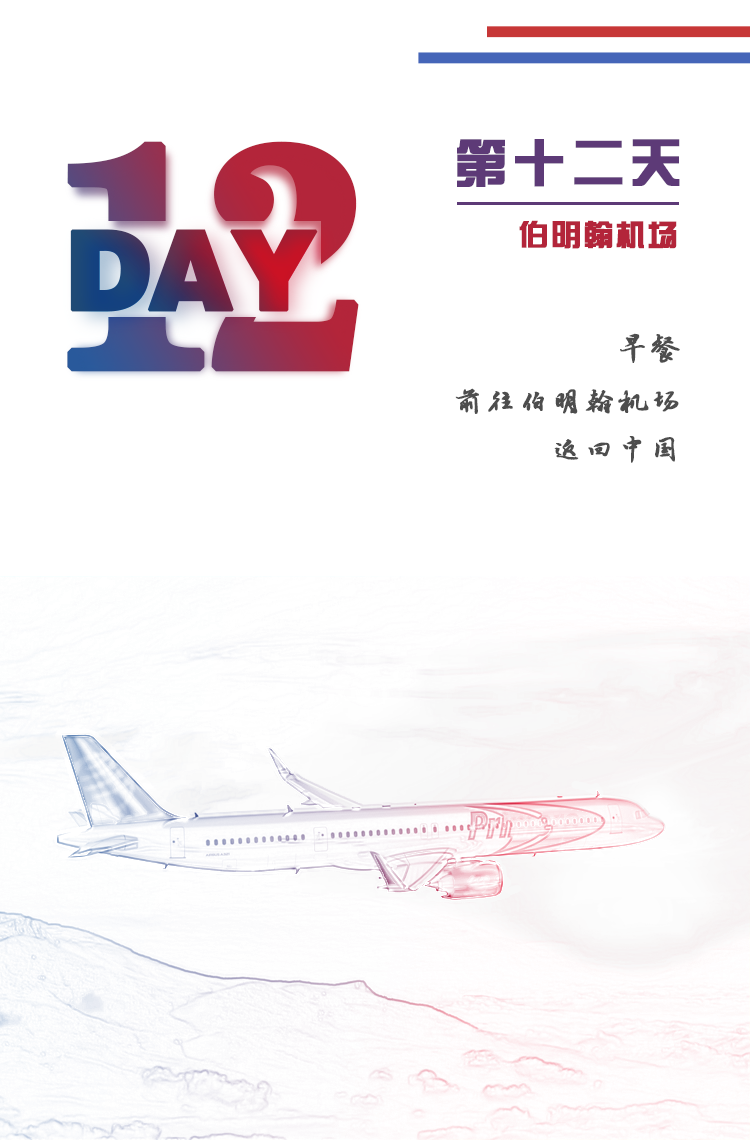
<style>
.page{position:relative;width:750px;height:1140px;background:#ffffff}
.page>*{position:absolute;margin:0}
.t1{font:320px "News706BT-BoldC";letter-spacing:-0.07em;font-weight:bold}
.t2{font:52px "FZZYJW--GB1-0";letter-spacing:0.1em;color:#5d3a77;font-weight:bold}
.t3{font:30px "FZZYJW--GB1-0";letter-spacing:0.05em;color:#b3253a;font-weight:bold}
.t4{font:110px "FZCCHJW--GB1-0";letter-spacing:-0.05em;font-weight:bold}
.t5{font:30px "·½ÕýÂÀ½¨µÂ×ÖÌå";letter-spacing:0.075em;color:#4d4d4d;font-weight:bold}
</style>
<div class="page">
<p class="t1" style="left:67px;top:141px;width:292px;height:231px">12</p>
<p class="t2" style="left:457px;top:139px;width:223px;height:48px">第十二天</p>
<p class="t3" style="left:519px;top:220px;width:158px;height:29px">伯明翰机场</p>
<p class="t4" style="left:70px;top:229px;width:248px;height:83px">DAY</p>
<p class="t5" style="left:620px;top:333px;width:60px;height:30px">早餐</p>
<p class="t5" style="left:455px;top:388px;width:224px;height:26px">前往伯明翰机场</p>
<p class="t5" style="left:554px;top:436px;width:121px;height:27px">返回中国</p>
</div>
